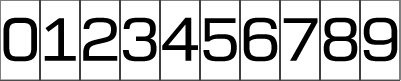
<style>
.page{position:relative;width:401px;height:81px;background:#ffffff}
.page>*{position:absolute;margin:0}
.t1{font:59px "Moire";color:#000000}
</style>
<div class="page">
<p class="t1" style="left:3px;top:17px;width:395px;height:45px">0123456789</p>
</div>
